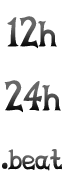
<style>
.page{position:relative;width:64px;height:192px;background:#ffffff}
.page>*{position:absolute;margin:0}
.t1{font:38.4px "CelestiaReduxAltMedium"}
.t2{font:30.7px "CelestiaReduxAltMedium"}
</style>
<div class="page">
<p class="t1" style="left:7px;top:16px;width:50px;height:33px">12h</p>
<p class="t1" style="left:4px;top:80px;width:57px;height:33px">24h</p>
<p class="t2" style="left:2px;top:149px;width:60px;height:22px">.beat</p>
</div>
